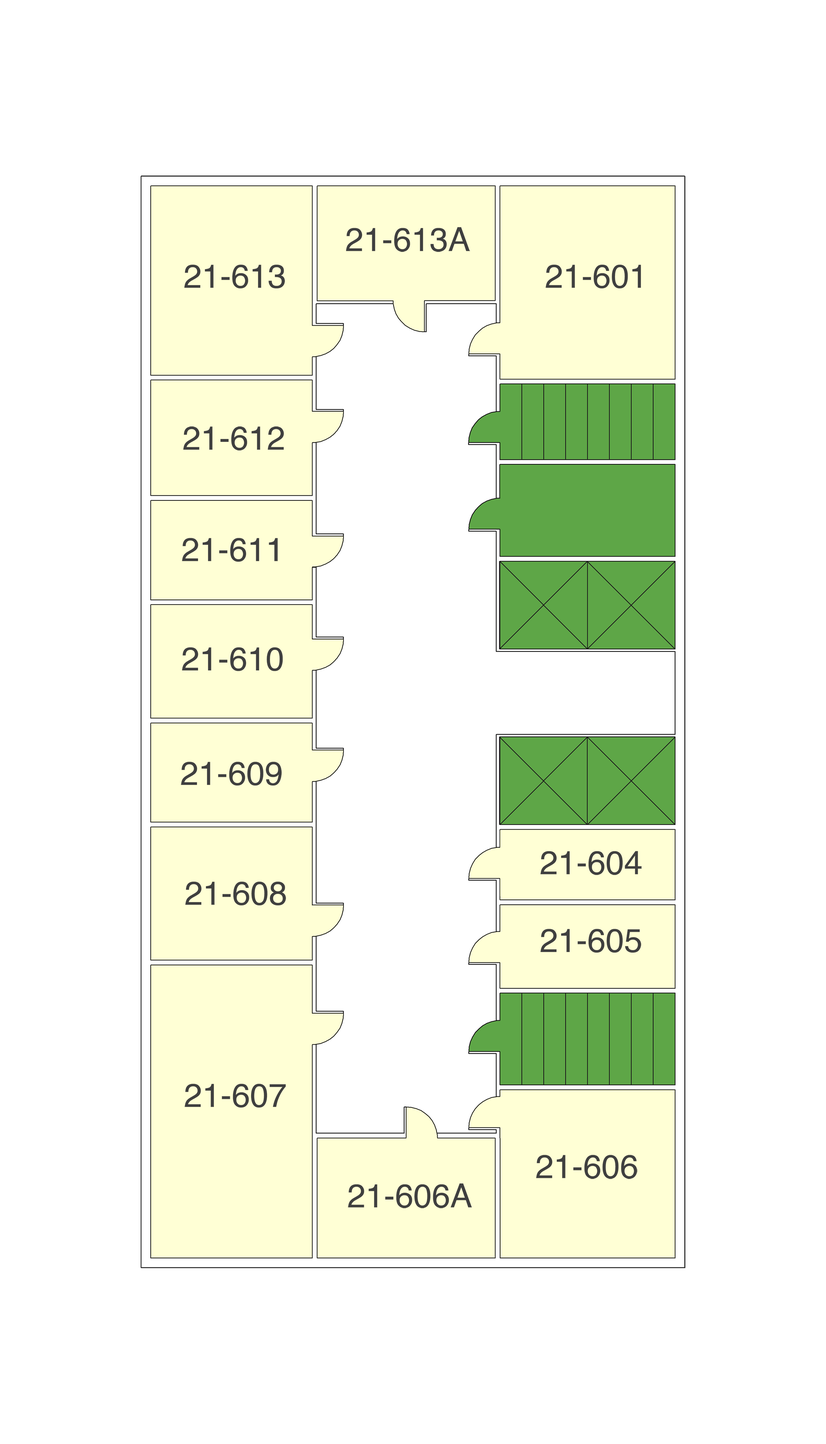
<style>
.page{position:relative;width:826px;height:1444px;background:#ffffff}
.page>*{position:absolute;margin:0}
.t1{font:33px "Helvetica";color:#3f3f3f}
</style>
<div class="page">
<p class="t1" style="left:346px;top:227px;width:124px;height:25px">21-613A</p>
<p class="t1" style="left:184px;top:265px;width:101px;height:24px">21-613</p>
<p class="t1" style="left:545px;top:265px;width:96px;height:24px">21-601</p>
<p class="t1" style="left:183px;top:426px;width:101px;height:25px">21-612</p>
<p class="t1" style="left:182px;top:538px;width:96px;height:24px">21-611</p>
<p class="t1" style="left:182px;top:647px;width:101px;height:24px">21-610</p>
<p class="t1" style="left:181px;top:762px;width:101px;height:24px">21-609</p>
<p class="t1" style="left:540px;top:851px;width:101px;height:24px">21-604</p>
<p class="t1" style="left:185px;top:882px;width:101px;height:24px">21-608</p>
<p class="t1" style="left:540px;top:929px;width:101px;height:24px">21-605</p>
<p class="t1" style="left:184px;top:1084px;width:102px;height:24px">21-607</p>
<p class="t1" style="left:536px;top:1155px;width:101px;height:24px">21-606</p>
<p class="t1" style="left:347px;top:1184px;width:125px;height:25px">21-606A</p>
</div>
